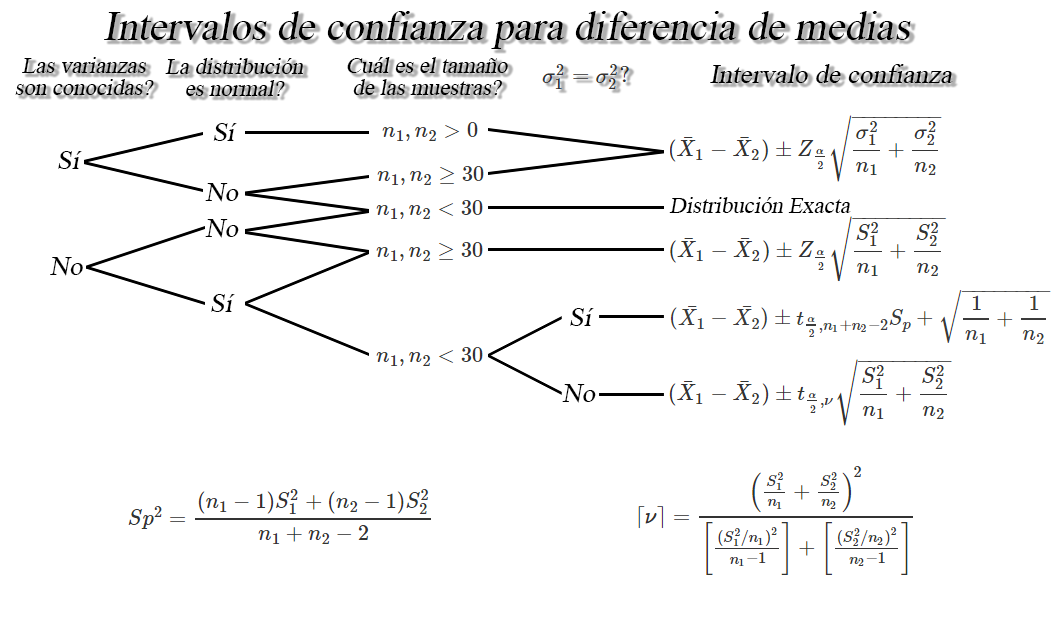
<style>
.page{position:relative;width:1060px;height:619px;background:#ffffff}
.page>*{position:absolute;margin:0}
.t1{font:30.5px "TimesNewRomanPSMT";color:#000000;font-style:italic}
.t2{font:17px/21.7px "TimesNewRomanPSMT";color:#000000;font-style:italic}
.t3{font:20.4px "TimesNewRomanPSMT";color:#000000;font-style:italic}
.t4{font:26.7px "TimesNewRomanPSMT";color:#000000;font-style:italic}
.t5{font:17px "TimesNewRomanPSMT";color:#000000;font-style:italic}
</style>
<div class="page">
<p class="t1" style="left:104px;top:11px;width:807px;height:38px">Intervalos de confianza para diferencia de medias</p>
<p class="t2" style="left:15px;top:57px;width:139px;height:38px;text-align:center">Las varianzas<br>son conocidas?</p>
<p class="t2" style="left:165px;top:58px;width:138px;height:38px;text-align:center">La distribución<br>es normal?</p>
<p class="t2" style="left:347px;top:57px;width:161px;height:38px;text-align:center">Cuál es el tamaño<br>de las muestras?</p>
<p class="t3" style="left:710px;top:64px;width:243px;height:19px">Intervalo de confianza</p>
<p class="t4" style="left:213px;top:123px;width:24px;height:18px">Sí</p>
<p class="t4" style="left:58px;top:151px;width:24px;height:18px">Sí</p>
<p class="t4" style="left:205px;top:183px;width:34px;height:19px">No</p>
<p class="t5" style="left:669px;top:197px;width:182px;height:16px">Distribución Exacta</p>
<p class="t4" style="left:205px;top:219px;width:34px;height:19px">No</p>
<p class="t4" style="left:50px;top:257px;width:33px;height:19px">No</p>
<p class="t4" style="left:211px;top:294px;width:24px;height:18px">Sí</p>
<p class="t4" style="left:570px;top:308px;width:24px;height:18px">Sí</p>
<p class="t4" style="left:562px;top:384px;width:34px;height:19px">No</p>
</div>
